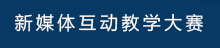
<style>
.page{position:relative;width:220px;height:48px;background:#063964}
.page>*{position:absolute;margin:0}
.t1{font:18px "MicrosoftYaHei";letter-spacing:0.2em;color:#ffffff}
</style>
<div class="page">
<p class="t1" style="left:14px;top:13px;width:189px;height:19px">新媒体互动教学大赛</p>
</div>
